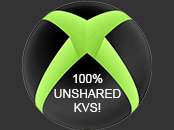
<style>
.page{position:relative;width:174px;height:130px;background:#333333}
.page>*{position:absolute;margin:0}
.t1{font:12px "ArialMT";color:#ffffff}
</style>
<div class="page">
<p class="t1" style="left:54px;top:74px;width:67px;height:38px;text-align:center">100%<br>UNSHARED <br>KVS!</p>
</div>
